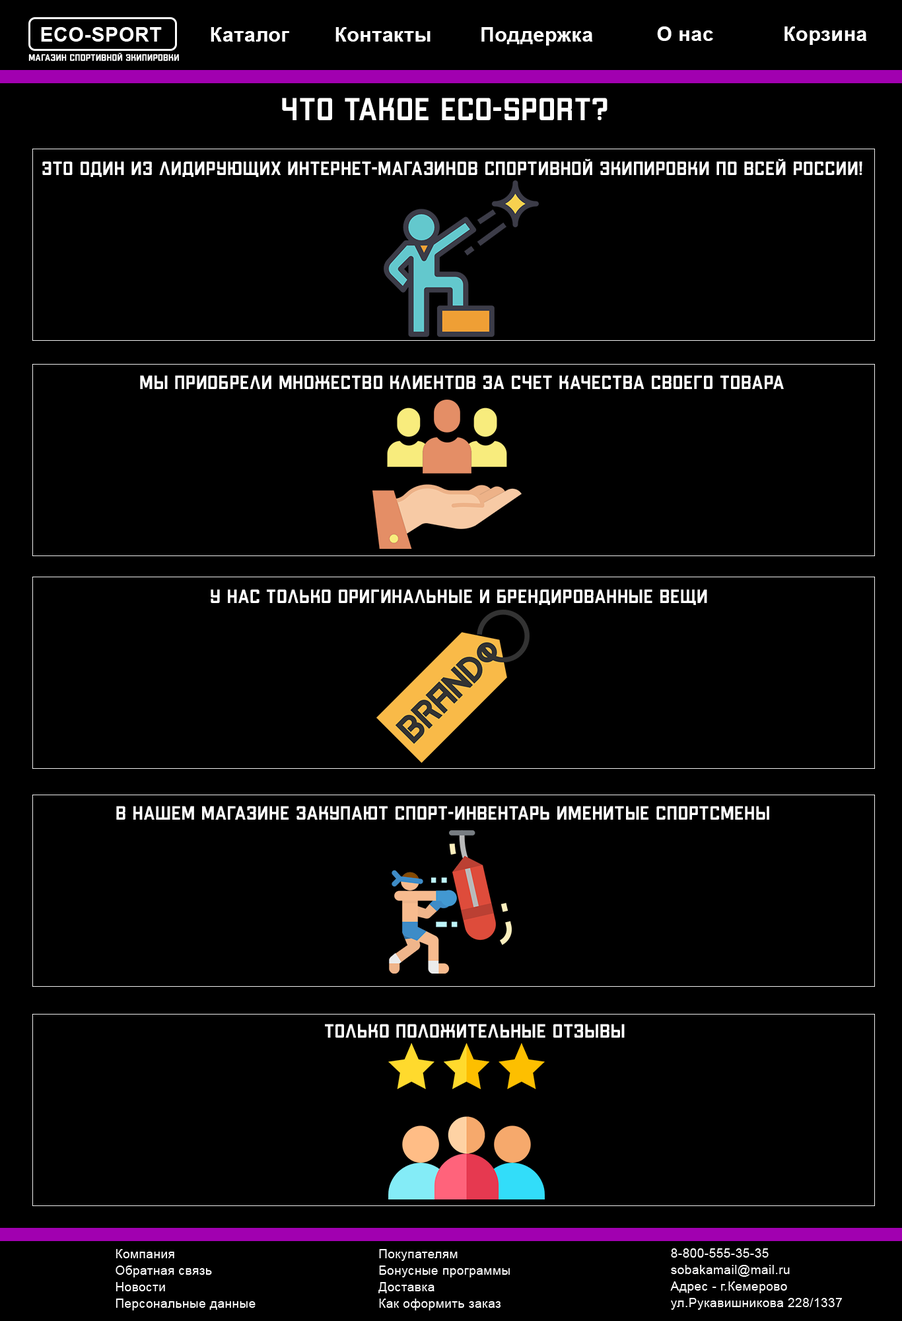
<style>
.page{position:relative;width:902px;height:1321px;background:#000000}
.page>*{position:absolute;margin:0}
.t1{font:19.8px "Arial-BoldMT";letter-spacing:0.025em;color:#ffffff}
.t2{font:9.2px "mr_ApexMk3-Medium";letter-spacing:0.025em;color:#ffffff}
.t3{font:31.7px "mr_ApexMk3-Medium";letter-spacing:0.025em;color:#ffffff}
.t4{font:19.1px "mr_ApexMk3-Medium";letter-spacing:0.025em;color:#ffffff}
</style>
<div class="page">
<p class="t1" style="left:211px;top:27px;width:78px;height:15px">Каталог</p>
<p class="t1" style="left:336px;top:27px;width:95px;height:15px">Контакты</p>
<p class="t1" style="left:482px;top:27px;width:111px;height:19px">Поддержка</p>
<p class="t1" style="left:657px;top:26px;width:57px;height:15px">О нас</p>
<p class="t1" style="left:785px;top:26px;width:82px;height:19px">Корзина</p>
<p class="t2" style="left:28px;top:53px;width:151px;height:8px">магазин спортивной экипировки</p>
<p class="t3" style="left:282px;top:98px;width:326px;height:22px">Что такое ECO-SPORT?</p>
<p class="t4" style="left:42px;top:159px;width:821px;height:18px">ЭТО ОДИН ИЗ ЛИДИРУЮЩИХ ИНТЕРНЕТ-МАГАЗИНОВ СПОРТИВНОЙ ЭКИПИРОВКИ ПО ВСЕЙ РОССИИ!</p>
<p class="t4" style="left:140px;top:375px;width:644px;height:14px">МЫ ПРИОБРЕЛИ МНОЖЕСТВО КЛИЕНТОВ ЗА СЧЕТ КАЧЕСТВА СВОЕГО ТОВАРА</p>
<p class="t4" style="left:211px;top:589px;width:497px;height:16px">У НАС ТОЛЬКО ОРИГИНАЛЬНЫЕ И БРЕНДИРОВАННЫЕ ВЕЩИ</p>
<p class="t4" style="left:116px;top:806px;width:654px;height:14px">В НАШЕМ МАГАЗИНЕ ЗАКУПАЮТ СПОРТ-ИНВЕНТАРЬ ИМЕНИТЫЕ СПОРТСМЕНЫ</p>
<p class="t4" style="left:325px;top:1024px;width:300px;height:14px">ТОЛЬКО ПОЛОЖИТЕЛЬНЫЕ ОТЗЫВЫ</p>
</div>
